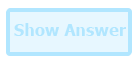
<style>
.page{position:relative;width:138px;height:64px;background:#e7f7ff}
.page>*{position:absolute;margin:0}
.t1{font:16.4px "Tahoma-Bold";color:#b1e6ff}
</style>
<div class="page">
<p class="t1" style="left:14px;top:23px;width:112px;height:13px">Show Answer</p>
</div>
